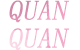
<style>
.page{position:relative;width:80px;height:50px;background:#ffffff}
.page>*{position:absolute;margin:0}
.t1{font:27.9px "SimSun";font-weight:bold;font-style:italic}
</style>
<div class="page">
<p class="t1" style="left:9px;top:0px;width:61px;height:51px;text-align:center">QUAN<br>QUAN</p>
</div>
